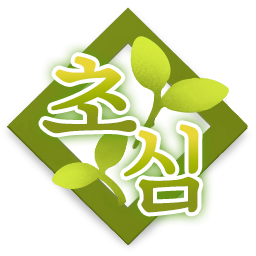
<style>
.page{position:relative;width:256px;height:256px;background:#ffffff}
.page>*{position:absolute;margin:0}
.t1{font:98.8px "SDKukdetopokki-aLt";letter-spacing:0.12em;scale:1.08 1}
.t2{font:98.8px "SDKukdetopokki-aLt";letter-spacing:0.12em;scale:0.96 1}
</style>
<div class="page">
<p class="t1" style="left:42px;top:56px;width:95px;height:78px">초</p>
<p class="t2" style="left:124px;top:124px;width:76px;height:89px">심</p>
</div>
